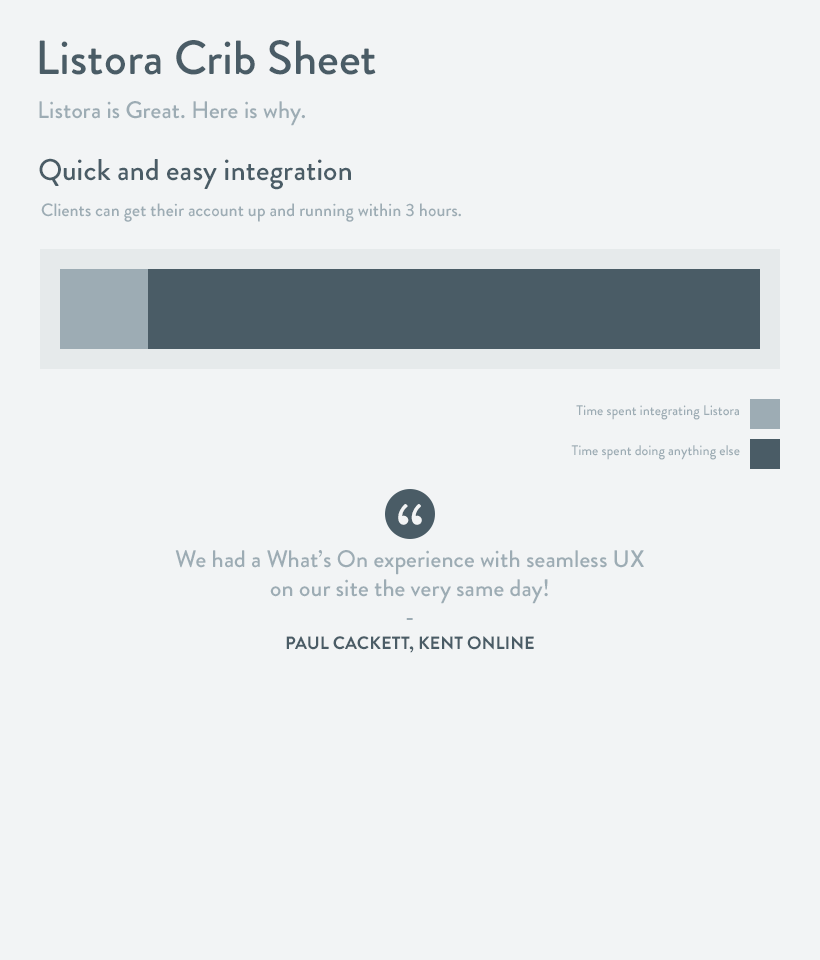
<style>
.page{position:relative;width:820px;height:960px;background:#f2f4f5}
.page>*{position:absolute;margin:0}
.t1{font:48px "BrandonGrotesque-Medium";color:#4a5c66}
.t2{font:24px "BrandonGrotesque-Medium";color:#9dacb4}
.t3{font:30px "BrandonGrotesque-Medium";color:#4a5c66}
.t4{font:18px "BrandonGrotesque-Medium";color:#9dacb4}
.t5{font:14px/20px "BrandonGrotesque-Medium";color:#9dacb4}
.t6{font:72px "BrandonGrotesque-Medium";color:#f2f4f5}
.t7{font:18px/24px "BrandonGrotesque-Bold";color:#4a5c66;text-transform:uppercase}
</style>
<div class="page">
<p class="t1" style="left:39px;top:40px;width:337px;height:35px">Listora Crib Sheet</p>
<p class="t2" style="left:39px;top:101px;width:266px;height:25px">Listora is Great. Here is why.</p>
<p class="t3" style="left:39px;top:158px;width:312px;height:32px">Quick and easy integration</p>
<p class="t4" style="left:41px;top:203px;width:420px;height:19px">Clients can get their account up and running within 3 hours.</p>
<p class="t5" style="left:571px;top:405px;width:169px;height:55px;text-align:right">Time spent integrating Listora<br><br>Time spent doing anything else</p>
<p class="t6" style="left:398px;top:504px;width:24px;height:21px">“</p>
<p class="t2" style="left:175px;top:550px;width:469px;height:103px;text-align:center">We had a What’s On experience with seamless UX<br>on our site the very same day!<br>-<br><span class="t7">Paul Cackett, Kent Online</span></p>
</div>
